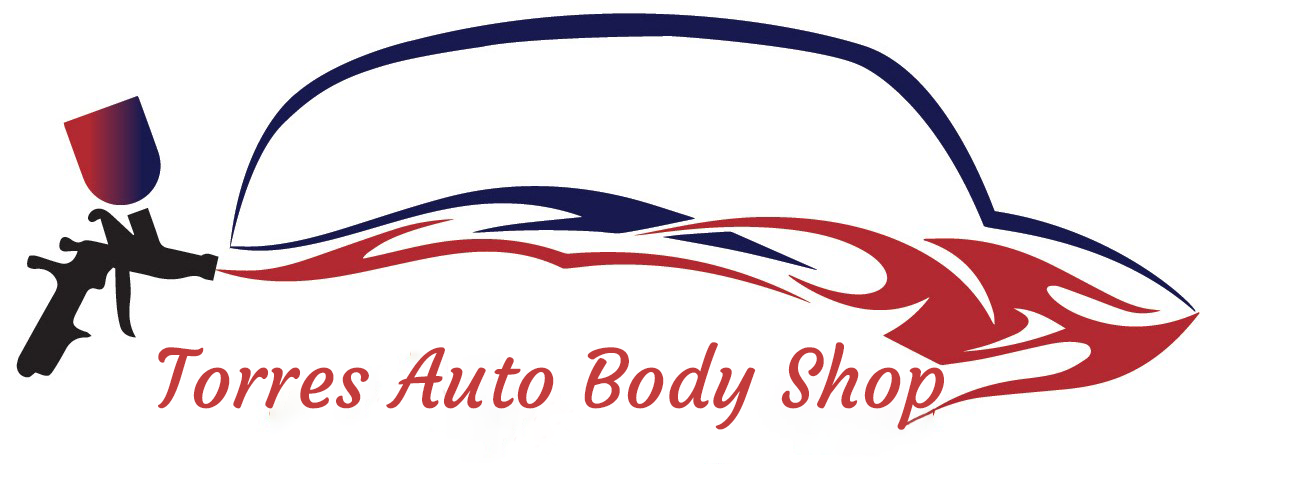
<style>
.page{position:relative;width:1302px;height:502px;background:#ffffff}
.page>*{position:absolute;margin:0}
.t1{font:80px "Courgette-Regular";color:#c33b3b}
</style>
<div class="page">
<p class="t1" style="left:158px;top:342px;width:786px;height:88px">Torres Auto Body Shop</p>
</div>
